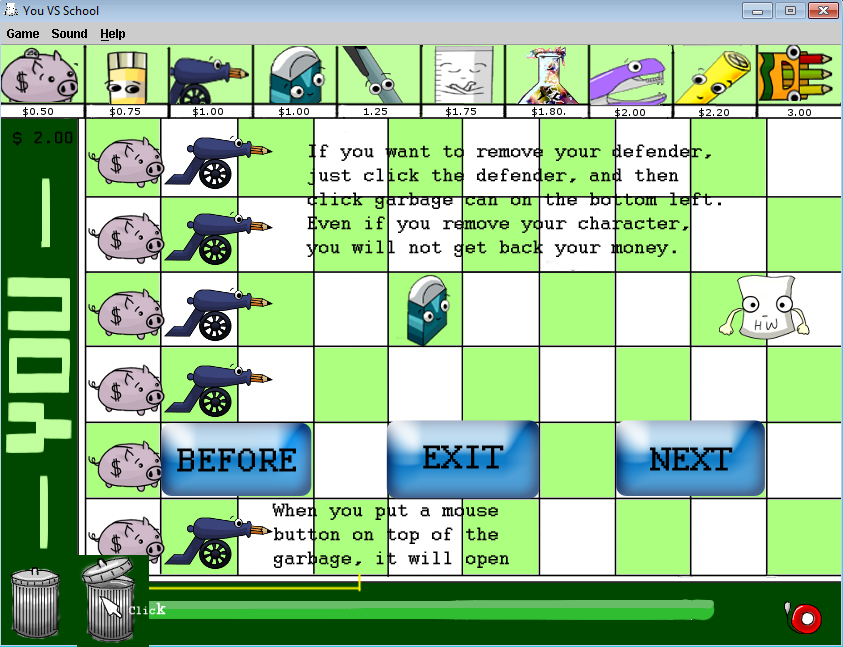
<style>
.page{position:relative;width:843px;height:647px;background:#ffffff}
.page>*{position:absolute;margin:0}
.t1{font:18px "Courier";color:#000000;font-weight:bold}
.t2{font:20px "Courier";color:#000000;font-weight:bold}
.t3{font:36px "Courier";color:#000000;font-weight:bold}
.t4{font:12px "Courier";color:#ffffff;font-weight:bold}
.t5{font:18px "Courier";color:#ffffff;font-weight:bold}
</style>
<div class="page">
<p class="t1" style="left:13px;top:131px;width:60px;height:15px">$ 2.00</p>
<p class="t2" style="left:306px;top:144px;width:415px;height:113px">If you want to remove your defender, just click the defender, and then click garbage can on the bottom left. Even if you remove your character, you will not get back your money.</p>
<p class="t3" style="left:177px;top:448px;width:119px;height:24px">BEFORE</p>
<p class="t3" style="left:423px;top:445px;width:81px;height:24px">EXIT</p>
<p class="t3" style="left:650px;top:447px;width:83px;height:24px">NEXT</p>
<p class="t2" style="left:272px;top:503px;width:237px;height:65px">When you put a mouse button on top of the garbage, it will open</p>
<p class="t4" style="left:129px;top:602px;width:37px;height:13px">Clic<span class="t5">k</span></p>
</div>
